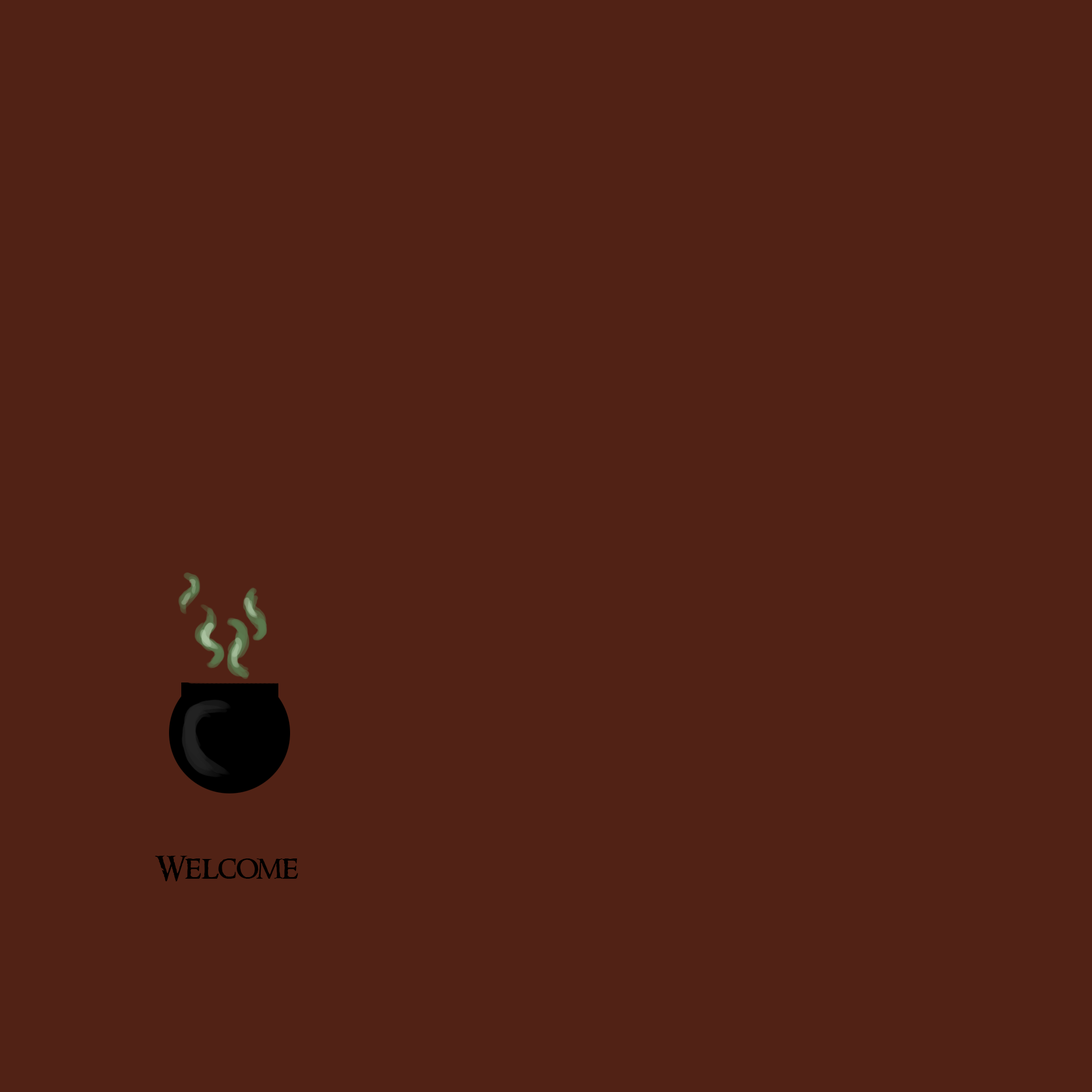
<style>
.page{position:relative;width:1092px;height:1092px;background:#512215}
.page>*{position:absolute;margin:0}
.t1{font:32px "RingbearerMedium";color:#000000}
</style>
<div class="page">
<p class="t1" style="left:155px;top:855px;width:143px;height:26px">Welcome</p>
</div>
